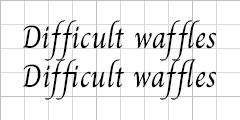
<style>
.page{position:relative;width:240px;height:120px;background:#ffffff}
.page>*{position:absolute;margin:0}
.t1{font:32px "Charm-Regular";color:#000000}
</style>
<div class="page">
<p class="t1" style="left:23px;top:20px;width:193px;height:80px;text-align:center">Difficult waffles<br>Difficult waffles</p>
</div>
